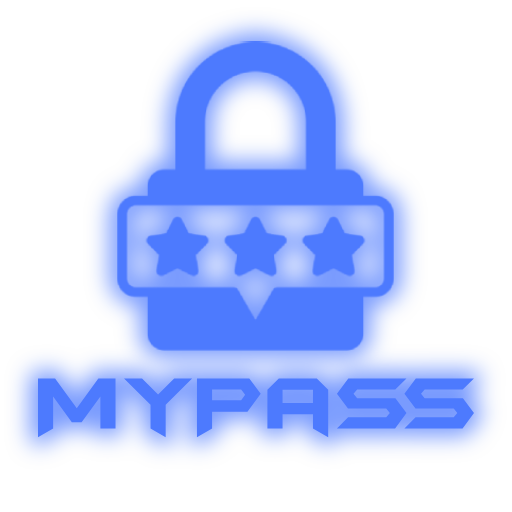
<style>
.page{position:relative;width:512px;height:512px;background:#ffffff}
.page>*{position:absolute;margin:0}
.t1{font:85px "BatmanForeverAlternate";color:#4d7afe}
</style>
<div class="page">
<p class="t1" style="left:38px;top:378px;width:436px;height:60px">MyPass</p>
</div>
